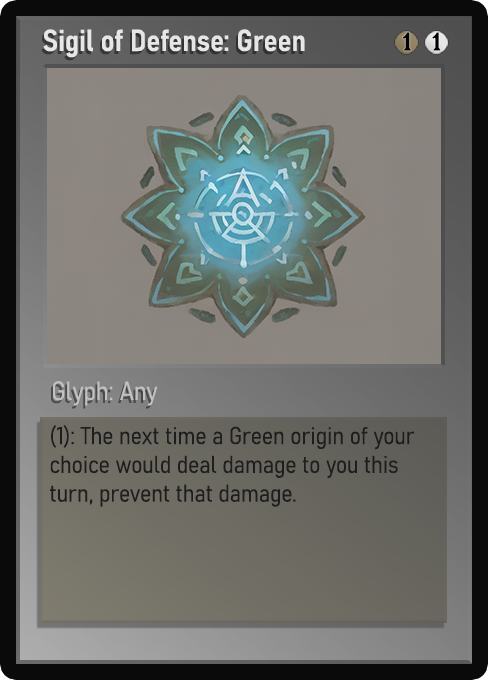
<style>
.page{position:relative;width:488px;height:680px}
.page>*{position:absolute;margin:0}
.t1{font:30px "Bahnschrift-SemiBoldSemiCondensed";color:#f2f2f2;font-weight:bold}
.t2{font:25px "WTRRoycroft";color:#000000;font-weight:bold;scale:1.09 1}
.t3{font:26px "Bahnschrift-LightSemiCondensed";color:#c8c8c8;font-weight:bold}
.t4{font:24px "Bahnschrift-LightSemiCondensed";color:#1e1e1e;font-weight:bold}
</style>
<div class="page">
<p class="t1" style="left:43px;top:29px;width:262px;height:29px;opacity:0.9">Sigil of Defense: Green</p>
<p class="t2" style="left:403px;top:32px;width:8px;height:19px">1</p>
<p class="t2" style="left:432px;top:32px;width:9px;height:19px">1</p>
<p class="t3" style="left:53px;top:381px;width:105px;height:25px;opacity:0.9">Glyph: Any</p>
<p class="t4" style="left:50px;top:425px;width:365px;height:82px">(1): The next time a Green origin of your choice would deal damage to you this turn, prevent that damage.</p>
</div>
